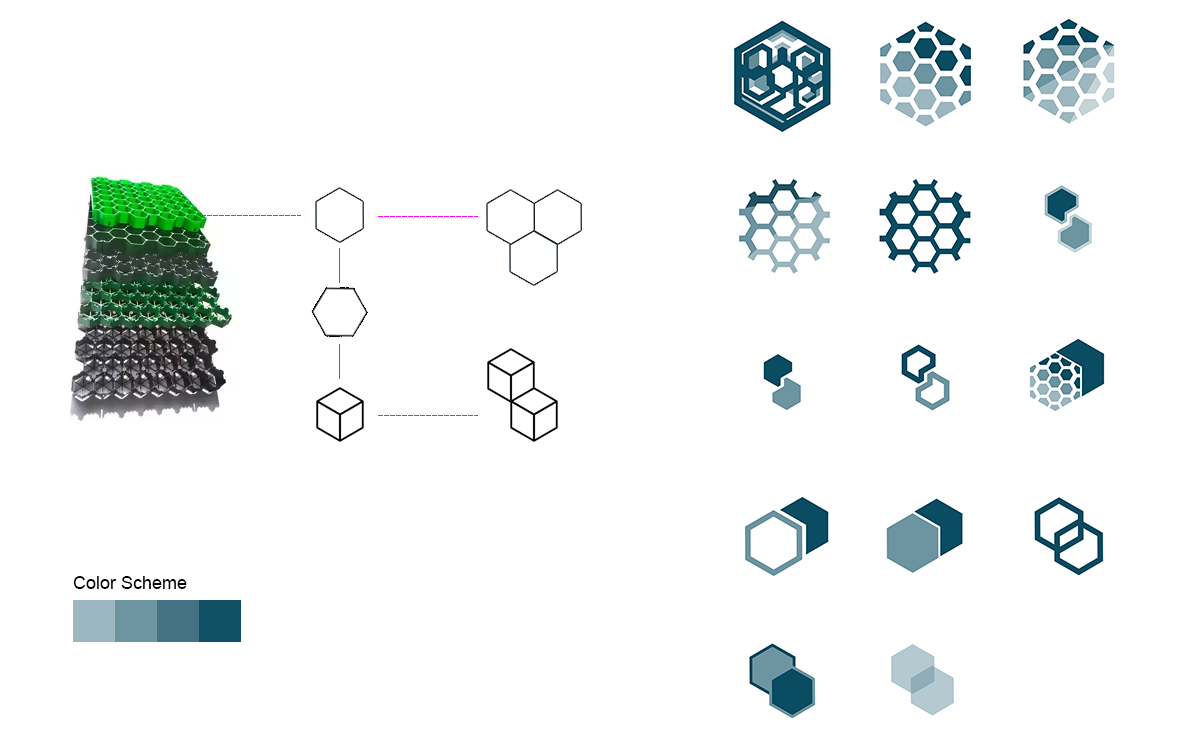
<style>
.page{position:relative;width:1200px;height:750px;background:#ffffff}
.page>*{position:absolute;margin:0}
.t1{font:18px "ArialMT";color:#000000}
</style>
<div class="page">
<p class="t1" style="left:73px;top:576px;width:114px;height:13px">Color Scheme</p>
</div>
